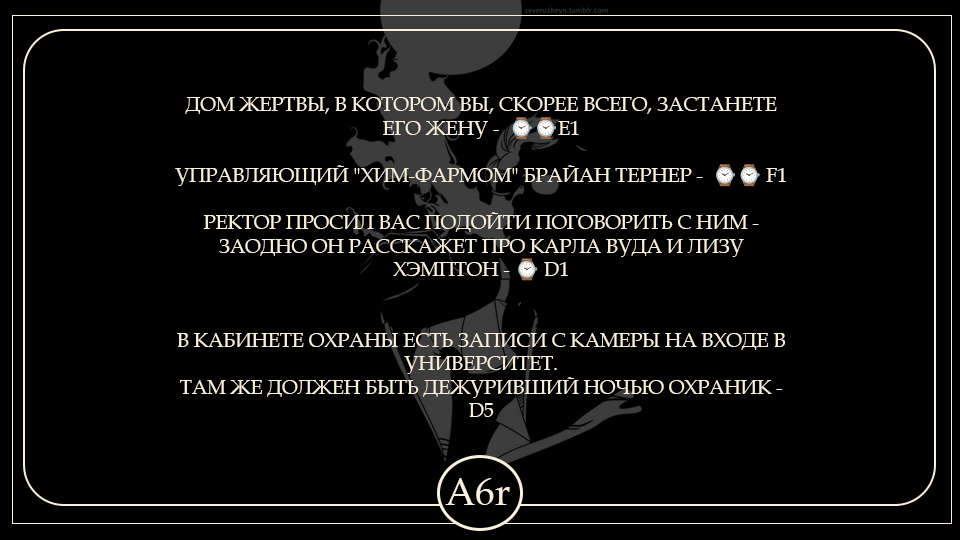
<style>
.page{position:relative;width:960px;height:540px;background:#000000}
.page>*{position:absolute;margin:0}
.t1{font:19.6px "BookAntiqua";color:#f9f1de;text-transform:uppercase}
.t2{font:19.6px "NotoColorEmoji-SVG";color:#cf0000}
.t3{font:38.8px "BookAntiqua";color:#f9f1de}
</style>
<div class="page">
<p class="t1" style="left:175px;top:97px;width:611px;height:320px;text-align:center">Дом жертвы, в котором вы, скорее всего, застанете его жену -  <span class="t2">⌚⌚</span>Е1<br><br>Управляющий "Хим-Фармом" Брайан Тернер -  <span class="t2">⌚⌚</span> F1<br><br>Ректор просил вас подойти поговорить с ним - заодно он расскажет про Карла Вуда и Лизу Хэмптон - <span class="t2">⌚</span> D1<br><br><br>В кабинете охраны есть записи с камеры на входе в Университет.<br>Там же должен быть дежуривший ночью охраник - D5</p>
<p class="t3" style="left:445px;top:478px;width:65px;height:27px">A6r</p>
</div>
